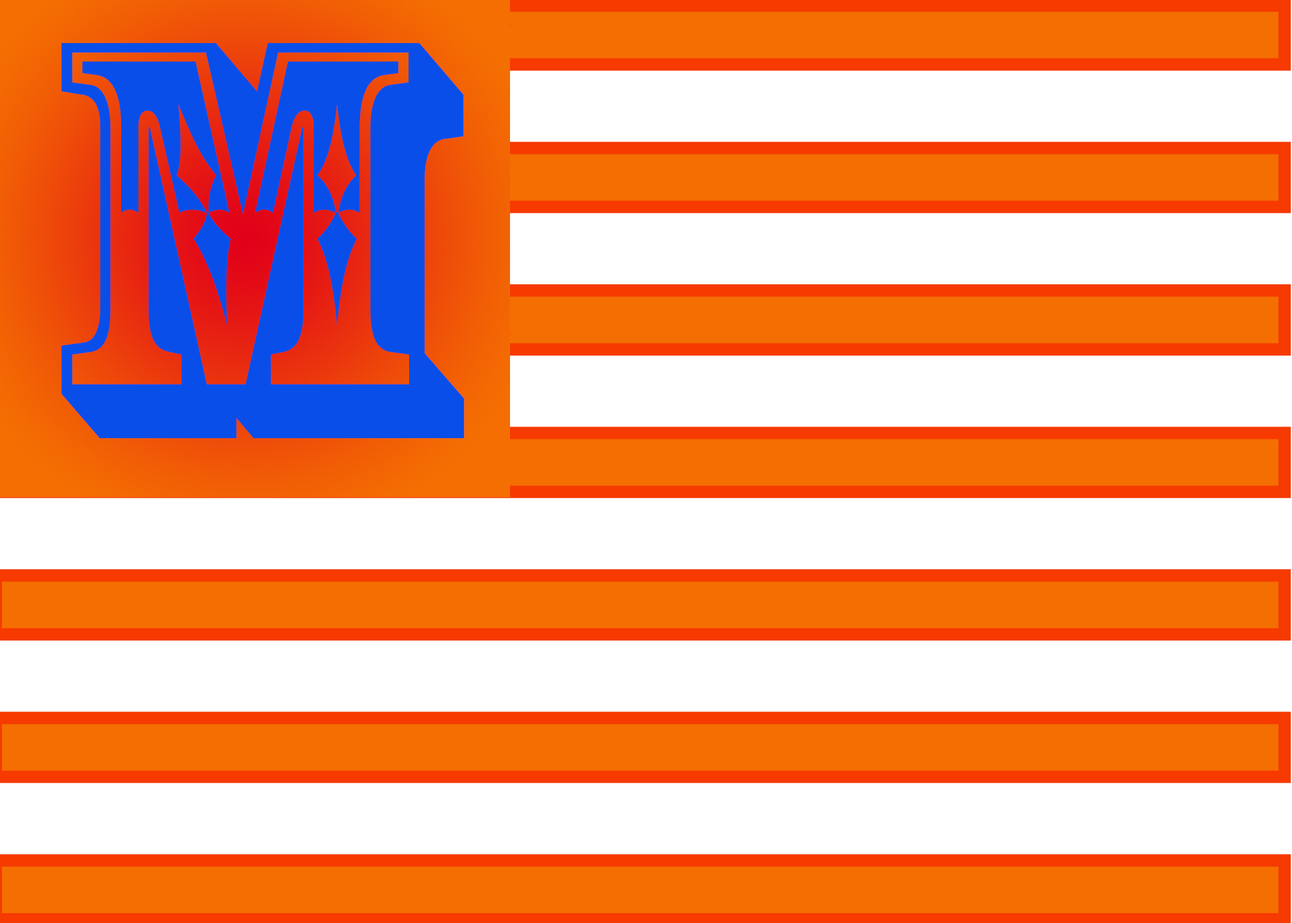
<style>
.page{position:relative;width:1292px;height:923px;background:#ffffff}
.page>*{position:absolute;margin:0}
.t1{font:527.2px "RosewoodStd-Regular";color:#094ee9;scale:1.13 1}
</style>
<div class="page">
<p class="t1" style="left:62px;top:43px;width:403px;height:396px">m</p>
</div>
